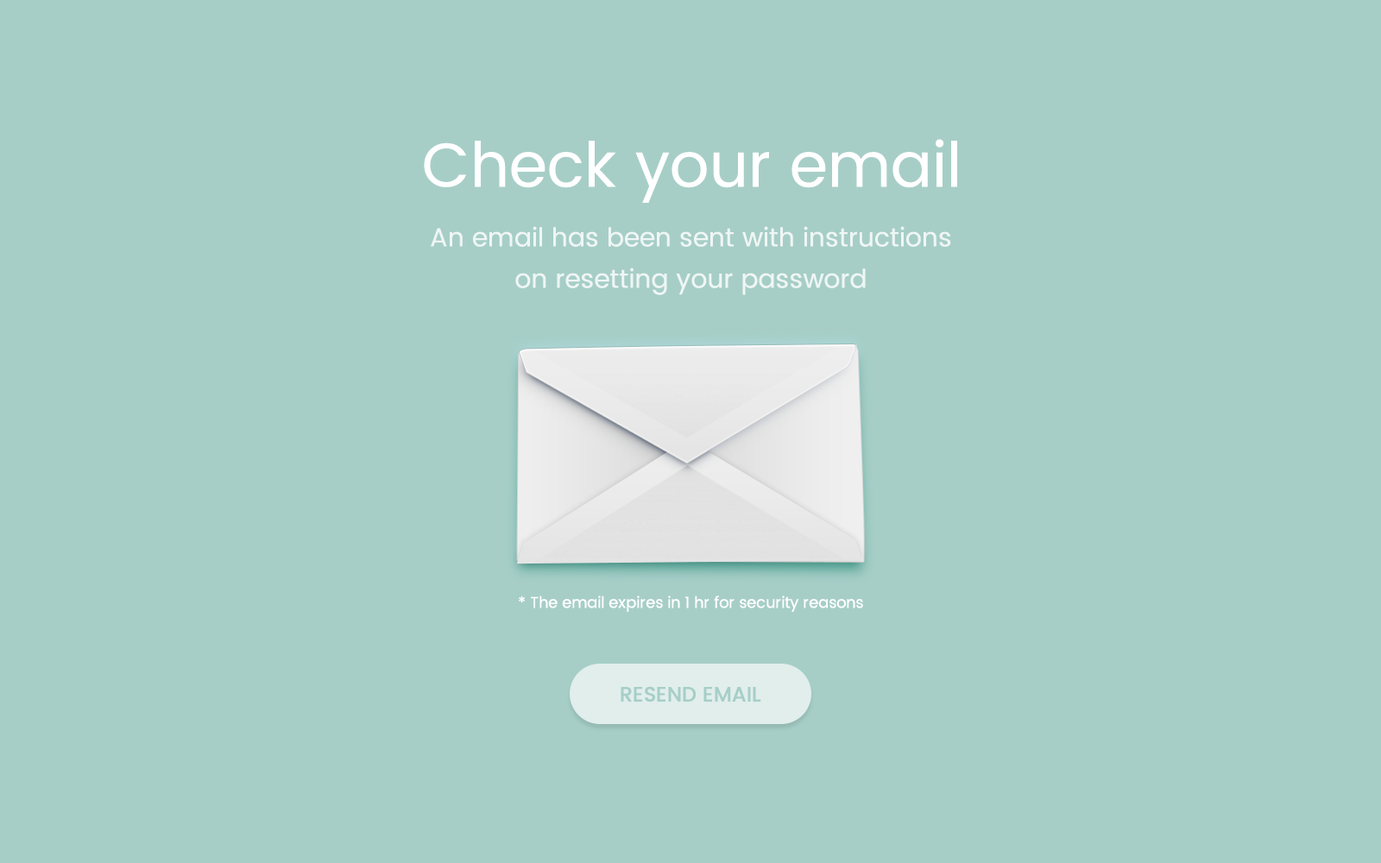
<style>
.page{position:relative;width:1381px;height:863px;background:#a6cec7}
.page>*{position:absolute;margin:0}
.t1{font:62.2px "Poppins-Regular";color:#ffffff}
.t2{font:25.9px/41.4px "Poppins-Regular";color:#ffffff}
.t3{font:15.5px "Poppins-Regular";color:#ffffff}
.t4{font:20.7px "Poppins-Medium";color:#a6cec7}
</style>
<div class="page">
<p class="t1" style="left:424px;top:139px;width:533px;height:64px">Check your email</p>
<p class="t2" style="left:431px;top:226px;width:520px;height:69px;text-align:center;opacity:0.8">An email has been sent with instructions<br>on resetting your password</p>
<p class="t3" style="left:519px;top:596px;width:344px;height:16px">* The email expires in 1 hr for security reasons</p>
<p class="t4" style="left:621px;top:686px;width:140px;height:16px">RESEND EMAIL</p>
</div>
